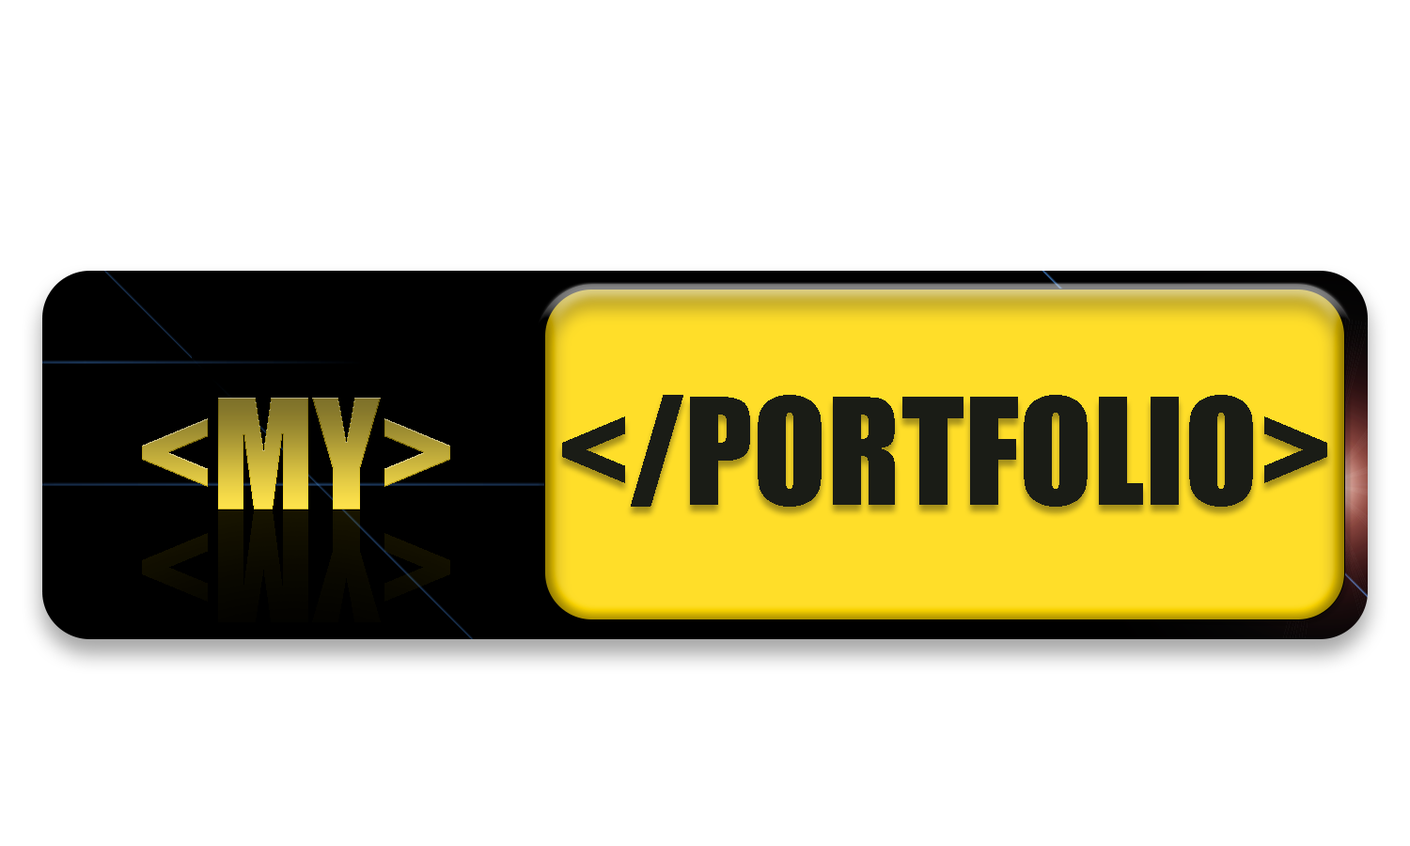
<style>
.page{position:relative;width:1410px;height:846px;background:#ffffff}
.page>*{position:absolute;margin:0}
.t1{font:140.9px "Impact"}
.t2{font:136.6px "Impact";color:#1a1c16}
</style>
<div class="page">
<p class="t1" style="left:142px;top:398px;width:308px;height:111px">&lt;MY&gt;</p>
<p class="t2" style="left:562px;top:395px;width:765px;height:112px">&lt;/PORTFOLIO&gt;</p>
</div>
